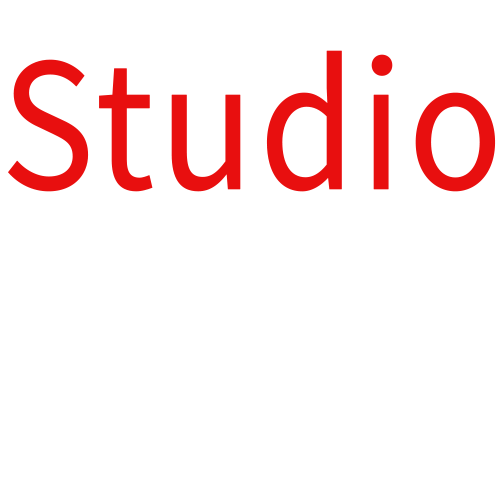
<style>
.page{position:relative;width:500px;height:500px;background:#ffffff}
.page>*{position:absolute;margin:0}
.t1{font:194px "SourceSansPro-Regular";color:#e80f0f;font-weight:bold;scale:0.9 1}
</style>
<div class="page">
<p class="t1" style="left:8px;top:50px;width:488px;height:142px">Studio</p>
</div>
